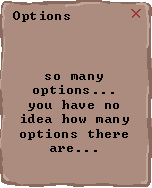
<style>
.page{position:relative;width:152px;height:188px;background:#ab8c7f}
.page>*{position:absolute;margin:0}
.t1{font:12px "Terminal";letter-spacing:0.04em;color:#000000}
</style>
<div class="page">
<p class="t1" style="left:13px;top:11px;width:57px;height:11px">Options</p>
<p class="t1" style="left:20px;top:74px;width:109px;height:78px;text-align:center">so many options...<br>you have no idea how many options there are...</p>
</div>
